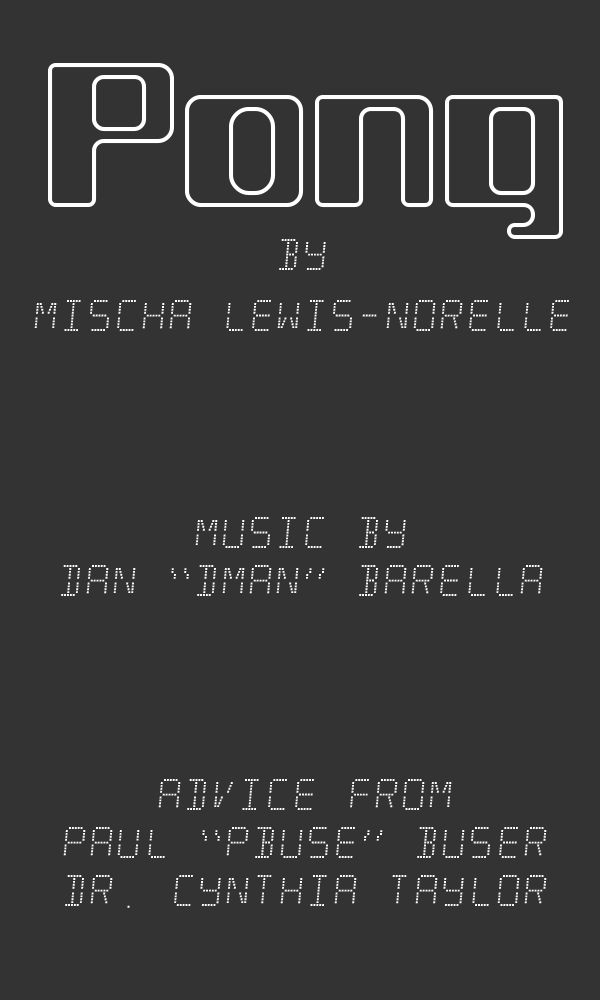
<style>
.page{position:relative;width:600px;height:1000px;background:#333333}
.page>*{position:absolute;margin:0}
.t1{font:200px "WhiteWolf";color:#ffffff}
.t2{font:40px "Minisystem-Regular";color:#ffffff}
</style>
<div class="page">
<p class="t1" style="left:48px;top:63px;width:515px;height:176px">Pong</p>
<p class="t2" style="left:279px;top:239px;width:47px;height:31px">By</p>
<p class="t2" style="left:34px;top:300px;width:535px;height:31px">Mischa Lewis-Norelle</p>
<p class="t2" style="left:61px;top:517px;width:482px;height:79px;text-align:center">Music By<br>DaN “DMan” Barella</p>
<p class="t2" style="left:63px;top:779px;width:484px;height:129px;text-align:center">Advice From<br>Paul “PBuse” Buser<br>Dr. CynthiA Taylor</p>
</div>
